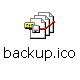
<style>
.page{position:relative;width:80px;height:80px;background:#ffffff}
.page>*{position:absolute;margin:0}
.t1{font:14px "MSReferenceSansSerif";color:#000000}
</style>
<div class="page">
<p class="t1" style="left:4px;top:47px;width:71px;height:14px">backup.ico</p>
</div>
